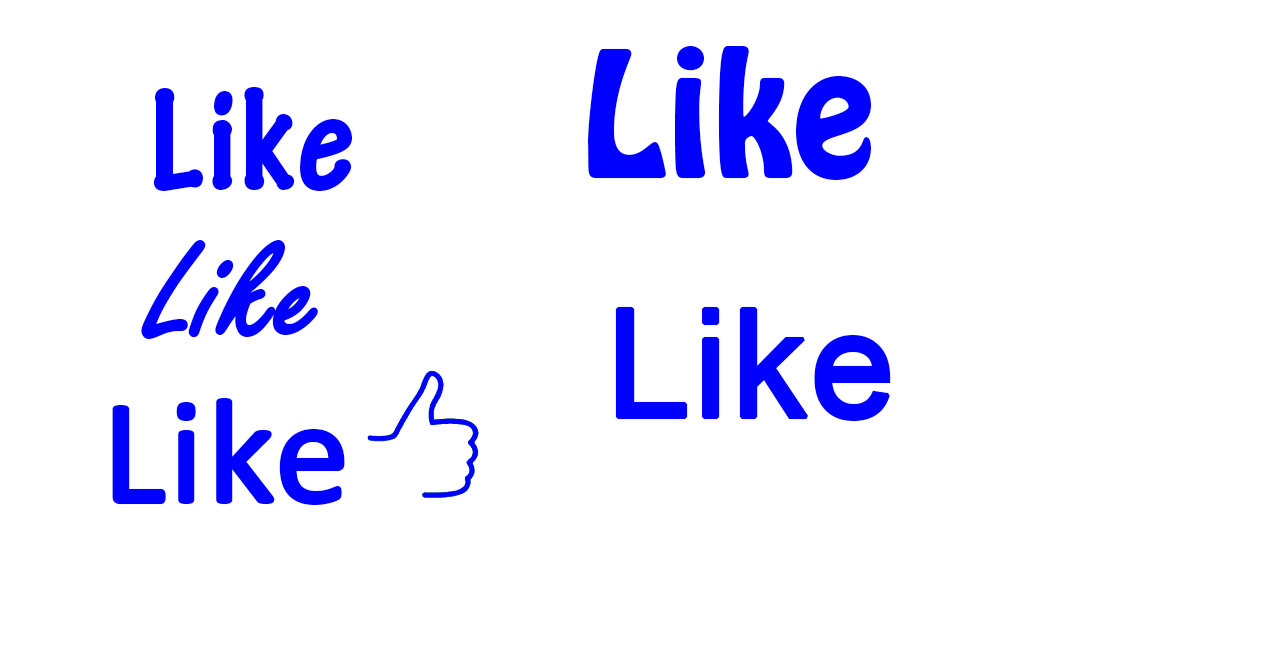
<style>
.page{position:relative;width:1280px;height:670px;background:#ffffff}
.page>*{position:absolute;margin:0}
.t1{font:150px "HoboStd";color:#0000ff;font-weight:bold}
.t2{font:150px "TektonPro-BoldCond";color:#0000ff;font-weight:bold}
.t3{font:150px "FreestyleScript-Regular";color:#0000ff;font-weight:bold}
.t4{font:150px "ArialMT";color:#0000ff;font-weight:bold}
.t5{font:150px "Calibri";color:#0000ff;font-weight:bold}
</style>
<div class="page">
<p class="t1" style="left:588px;top:45px;width:284px;height:136px">Like</p>
<p class="t2" style="left:153px;top:86px;width:199px;height:106px">Like</p>
<p class="t3" style="left:141px;top:239px;width:177px;height:101px">Like</p>
<p class="t4" style="left:615px;top:306px;width:276px;height:116px">Like</p>
<p class="t5" style="left:112px;top:397px;width:233px;height:109px">Like</p>
</div>
